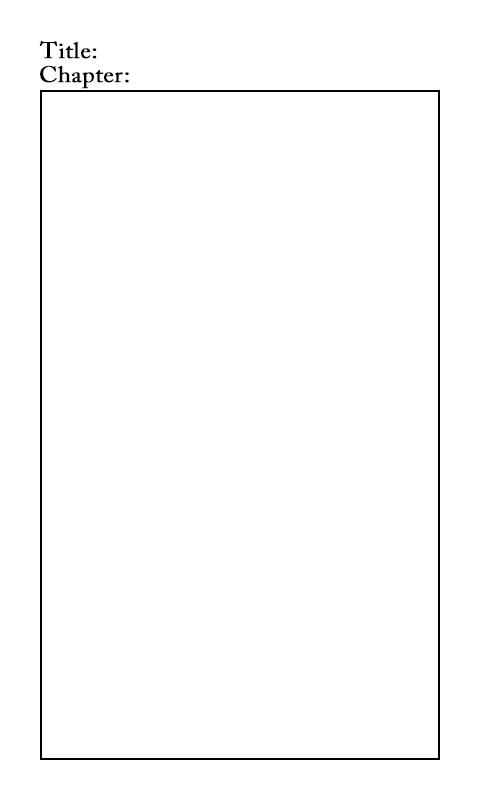
<style>
.page{position:relative;width:480px;height:800px;background:#ffffff}
.page>*{position:absolute;margin:0}
.t1{font:22.5px "ACaslonPro-Regular";color:#000000;font-weight:bold;scale:1.07 1}
</style>
<div class="page">
<p class="t1" style="left:39px;top:41px;width:58px;height:18px">Title:</p>
<p class="t1" style="left:40px;top:65px;width:89px;height:24px">Chapter:</p>
</div>
